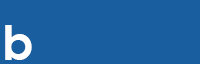
<style>
.page{position:relative;width:200px;height:64px;background:#195fa0}
.page>*{position:absolute;margin:0}
.t1{font:48px "CenturyGothic-Bold";color:#ffffff}
</style>
<div class="page">
<p class="t1" style="left:5px;top:25px;width:27px;height:35px">b</p>
</div>
